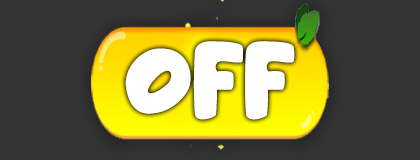
<style>
.page{position:relative;width:420px;height:160px;background:#333333}
.page>*{position:absolute;margin:0}
.t1{font:115.4px "Beachday";color:#ffffff;text-transform:uppercase}
</style>
<div class="page">
<p class="t1" style="left:125px;top:41px;width:170px;height:79px">Off</p>
</div>
